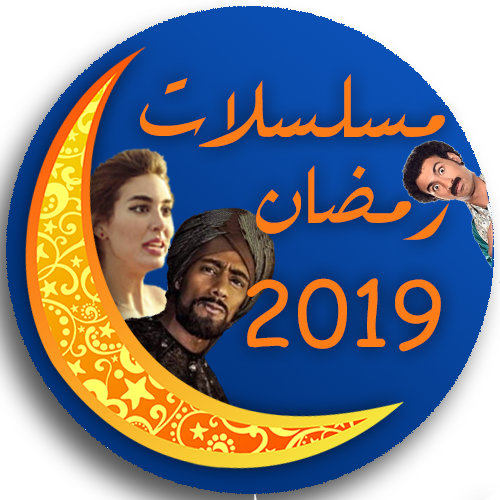
<style>
.page{position:relative;width:500px;height:500px}
.page>*{position:absolute;margin:0}
.t1{font:120px "Rekaa";color:#fc7c17}
.t2{font:90px "ComicSansMS";color:#fc7c17}
</style>
<div class="page">
<p class="t1" style="left:140px;top:74px;width:305px;height:73px">مسلسلات</p>
<p class="t1" style="left:256px;top:165px;width:193px;height:75px">رمضان</p>
<p class="t2" style="left:247px;top:278px;width:194px;height:74px">2019</p>
</div>
